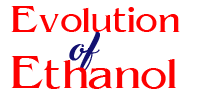
<style>
.page{position:relative;width:200px;height:100px;background:#ffffff}
.page>*{position:absolute;margin:0}
.t1{font:35.8px "Azol-Lys";color:#ff0000;scale:1.14 1}
.t2{font:35.8px "BacktoBlackDemo";color:#131171;scale:1.14 1}
.t3{font:43px "Azol-Lys";color:#fc0000;scale:1.14 1}
</style>
<div class="page">
<p class="t1" style="left:11px;top:6px;width:169px;height:26px">Evolution</p>
<p class="t2" style="left:69px;top:32px;width:31px;height:40px">of</p>
<p class="t3" style="left:11px;top:56px;width:165px;height:33px">Ethanol</p>
</div>
